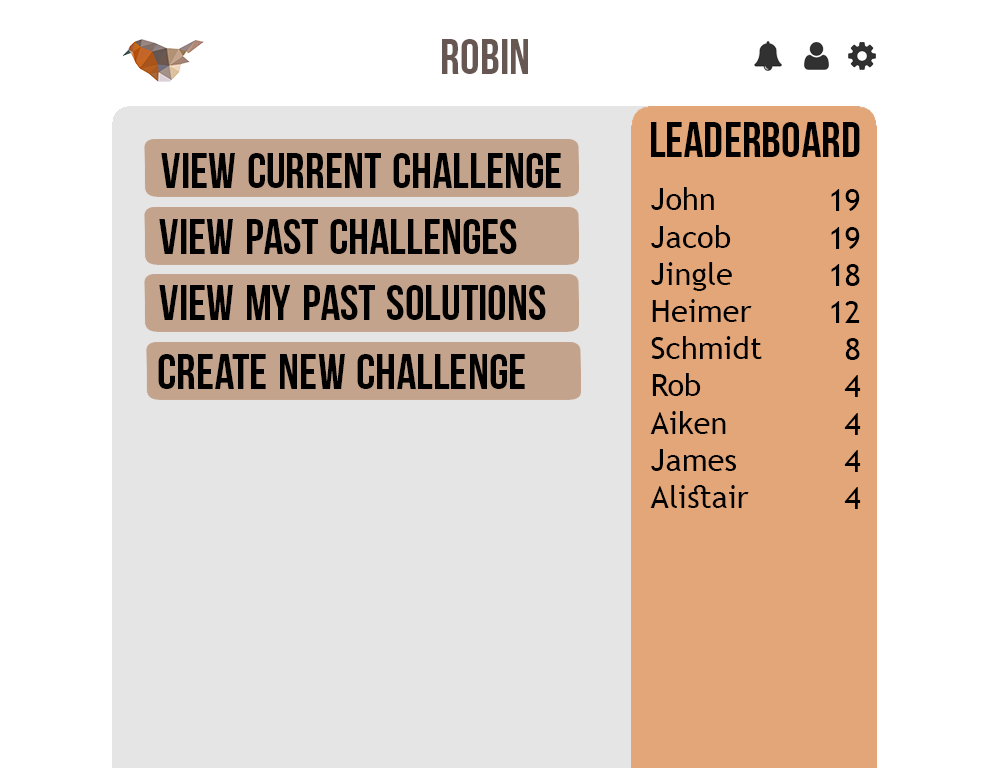
<style>
.page{position:relative;width:997px;height:768px;background:#ffffff}
.page>*{position:absolute;margin:0}
.t1{font:70.3px "BebasNeue";color:#665752;font-variant:small-caps}
.t2{font:70.3px "BebasNeue";color:#000000;font-variant:small-caps}
.t3{font:31px "TrebuchetMS";color:#000000}
</style>
<div class="page">
<p class="t1" style="left:442px;top:39px;width:86px;height:35px">robin</p>
<p class="t2" style="left:651px;top:122px;width:209px;height:35px">leaderboard</p>
<p class="t2" style="left:161px;top:153px;width:400px;height:35px">view current challenge</p>
<p class="t3" style="left:650px;top:187px;width:112px;height:321px">John<br>Jacob<br>Jingle<br>Heimer<br>Schmidt<br>Rob<br>Aiken<br>James<br>Alistair</p>
<p class="t3" style="left:831px;top:189px;width:30px;height:320px;text-align:right">19<br>19<br>18<br>12<br>8<br>4<br>4<br>4<br>4</p>
<p class="t2" style="left:159px;top:219px;width:358px;height:35px">view past challenges</p>
<p class="t2" style="left:159px;top:285px;width:387px;height:35px">view my past solutions</p>
<p class="t2" style="left:158px;top:354px;width:367px;height:35px">create new challenge</p>
</div>
